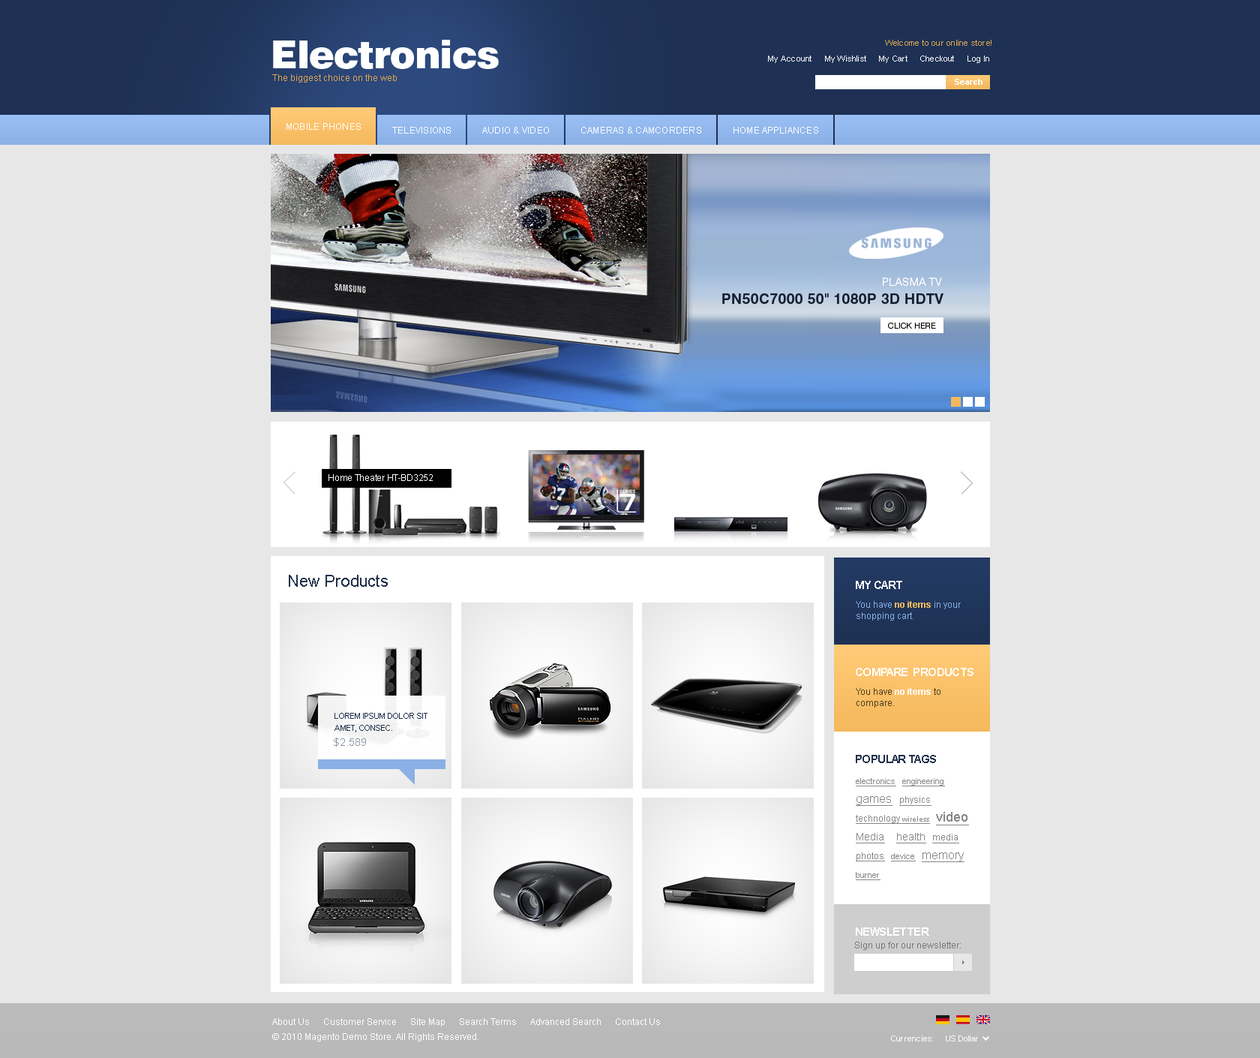
<style>
.page{position:relative;width:1260px;height:1058px;background:#e7e7e7}
.page>*{position:absolute;margin:0}
.t1{font:38.2px "Swiss721BT-Black";letter-spacing:-0.02em;color:#ffffff}
.t2{font:8.2px "ArialMT";letter-spacing:0.02em;color:#dda651}
.t3{font:8.2px "ArialMT";letter-spacing:0.02em;color:#ffffff}
.t4{font:9px "ArialMT";color:#dda651}
.t5{font:8.2px "Arial-BoldMT";color:#fdfdfd}
.t6{font:9px "ArialMT";letter-spacing:0.02em;color:#ffffff;text-transform:uppercase}
.t7{font:11.2px "Swiss721BT-Light";letter-spacing:0.02em;color:#ffffff;text-transform:uppercase}
.t8{font:14.2px "Swiss721BT-Bold";letter-spacing:0.02em;color:#131e2f;text-transform:uppercase}
.t9{font:8.2px "Swiss721BT-Light";letter-spacing:0.02em;color:#040505;text-transform:uppercase}
.t10{font:9px "ArialMT";letter-spacing:-0.02em;color:#ffffff}
.t11{font:16.5px "ArialMT";color:#20314b}
.t12{font:11.2px "Arial-BoldMT";letter-spacing:-0.04em;color:#ffffff;text-transform:uppercase}
.t13{font:9px/11.2px "ArialMT";color:#8ab0e6}
.t14{font:9px/11.2px "Arial-BoldMT";color:#f5b95d}
.t15{font:9px/11.2px "ArialMT";color:#523d1e}
.t16{font:9px/11.2px "Arial-BoldMT";color:#ffffff}
.t17{font:8.2px/12px "ArialMT";color:#20314b;text-transform:uppercase}
.t18{font:10.5px "ArialMT";color:#8f97a4;text-transform:uppercase}
.t19{font:11.2px "Arial-BoldMT";letter-spacing:-0.04em;color:#20314b;text-transform:uppercase}
.t20{font:8.2px/18.7px "ArialMT";color:#878787;text-decoration:underline}
.t21{font:12px/18.7px "ArialMT";color:#878787;text-decoration:underline}
.t22{font:9px/18.7px "ArialMT";color:#878787;text-decoration:underline}
.t23{font:7.5px/18.7px "ArialMT";color:#878787;text-decoration:underline}
.t24{font:13.5px/18.7px "ArialMT";color:#878787;text-decoration:underline}
.t25{font:10.5px/15px "ArialMT";color:#878787;text-decoration:underline}
.t26{font:10.5px/18.7px "ArialMT";color:#878787;text-decoration:underline}
.t27{font:9px "ArialMT";color:#777777}
.t28{font:9px/15px "ArialMT";color:#ffffff}
.t29{font:8.2px "ArialMT";color:#ffffff}
</style>
<div class="page">
<p class="t1" style="left:273px;top:40px;width:226px;height:29px">Electronics</p>
<p class="t2" style="left:885px;top:40px;width:107px;height:6px">Welcome to our online store!</p>
<p class="t3" style="left:768px;top:56px;width:221px;height:7px">My Account     My Wishlist     My Cart     Checkout     Log In</p>
<p class="t4" style="left:272px;top:74px;width:125px;height:8px">The biggest choice on the web</p>
<p class="t5" style="left:955px;top:79px;width:27px;height:6px">Search</p>
<p class="t6" style="left:286px;top:123px;width:75px;height:7px">Mobile phones</p>
<p class="t6" style="left:392px;top:127px;width:59px;height:7px">Televisions</p>
<p class="t6" style="left:482px;top:127px;width:67px;height:7px">Audio &amp; Video</p>
<p class="t6" style="left:581px;top:127px;width:120px;height:7px">Cameras &amp; Camcorders</p>
<p class="t6" style="left:734px;top:127px;width:84px;height:7px">Home appliances</p>
<p class="t7" style="left:883px;top:278px;width:59px;height:8px">Plasma TV</p>
<p class="t8" style="left:722px;top:293px;width:222px;height:11px">PN50C7000 50" 1080p 3D HDTV</p>
<p class="t9" style="left:888px;top:322px;width:48px;height:6px">cLICK HERE</p>
<p class="t10" style="left:328px;top:474px;width:105px;height:7px">Home Theater HT-BD3252</p>
<p class="t11" style="left:289px;top:574px;width:99px;height:12px">New Products</p>
<p class="t12" style="left:856px;top:580px;width:46px;height:9px">My Cart</p>
<p class="t13" style="left:856px;top:601px;width:105px;height:19px">You have <span class="t14">no items</span> in your <br>shopping cart.</p>
<p class="t12" style="left:856px;top:668px;width:118px;height:8px">Compare  Products</p>
<p class="t15" style="left:856px;top:688px;width:84px;height:19px">You have <span class="t16">no items</span> to <br>compare.</p>
<p class="t17" style="left:334px;top:712px;width:94px;height:20px">Lorem ipsum dolor sit amet, consec.</p>
<p class="t18" style="left:334px;top:737px;width:32px;height:9px">$2.589</p>
<p class="t19" style="left:856px;top:754px;width:80px;height:9px">Popular Tags</p>
<p class="t20" style="left:856px;top:778px;width:113px;height:102px">electronics   engineering   <br><span class="t21">games   </span><span class="t22">physics   <br>technology </span><span class="t23">wireless   </span><span class="t24">video   <br></span><span class="t25">Media    </span><span class="t26">health   </span><span class="t22">media   <br>photos   </span>device   <span class="t21">memory   <br></span>burner</p>
<p class="t12" style="left:856px;top:927px;width:73px;height:8px">Newsletter</p>
<p class="t27" style="left:855px;top:941px;width:106px;height:9px">Sign up for our newsletter:</p>
<p class="t28" style="left:272px;top:1018px;width:388px;height:23px">About Us      Customer Service      Site Map      Search Terms      Advanced Search      Contact Us<br>© 2010 Magento Demo Store. All Rights Reserved.</p>
<p class="t3" style="left:891px;top:1035px;width:42px;height:6px">Currencies:</p>
<p class="t29" style="left:946px;top:1035px;width:32px;height:6px">US Dollar</p>
</div>
